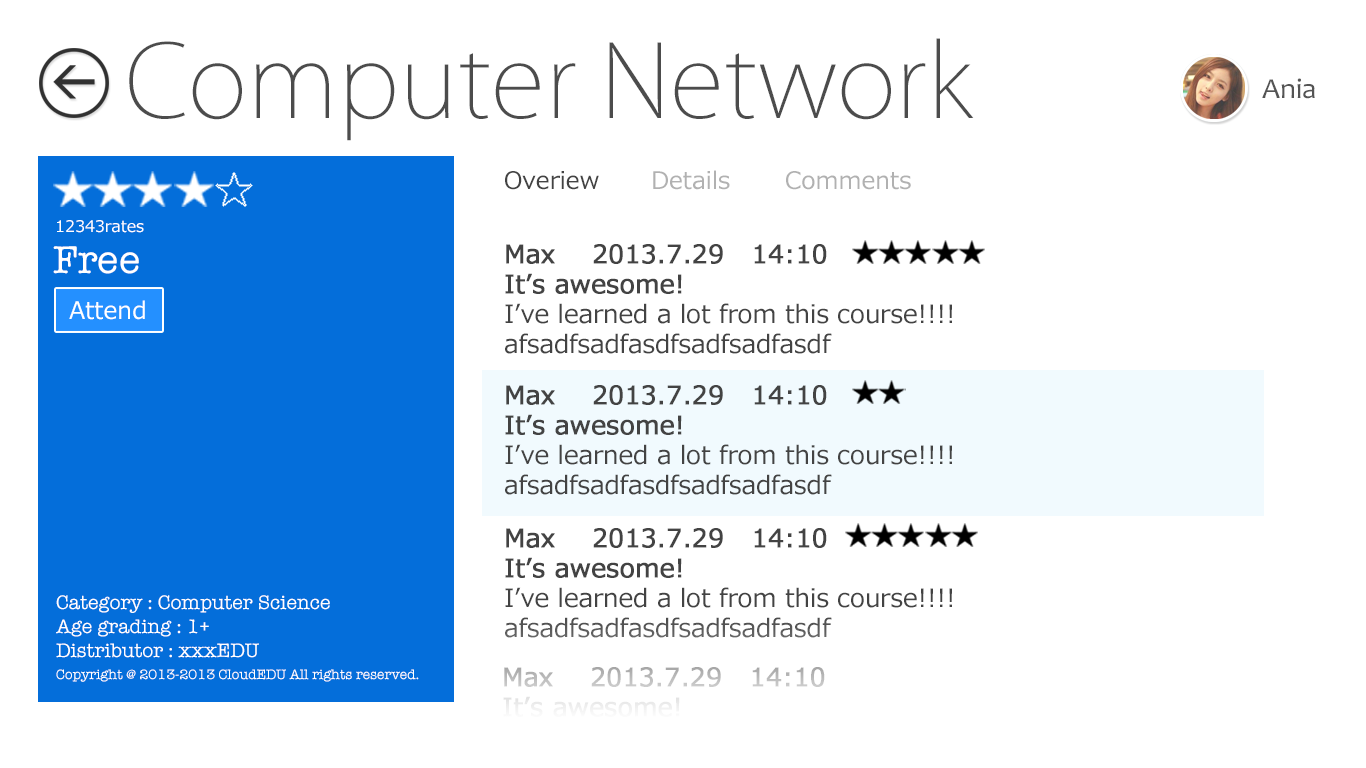
<style>
.page{position:relative;width:1366px;height:768px;background:#ffffff}
.page>*{position:absolute;margin:0}
.t1{font:100px "KozGoPr6N-ExtraLight";color:#4c4c4c}
.t2{font:29.2px "Candara";color:#545454}
.t3{font:24px "Meiryo";color:#434343}
.t4{font:24px "Meiryo";color:#b1b1b1}
.t5{font:16px "Meiryo";color:#ffffff}
.t6{font:40px "AmericanTypewriter";color:#ffffff}
.t7{font:25px "Meiryo";color:#434343}
.t8{font:25px "Meiryo";color:#434343;font-weight:bold}
.t9{font:24px "Meiryo";color:#ffffff}
.t10{font:20px "AmericanTypewriter";color:#ffffff}
.t11{font:14px "AmericanTypewriter";color:#ffffff}
</style>
<div class="page">
<p class="t1" style="left:129px;top:38px;width:845px;height:103px">Computer Network</p>
<p class="t2" style="left:1262px;top:78px;width:53px;height:21px">Ania</p>
<p class="t3" style="left:505px;top:171px;width:94px;height:19px">Overiew</p>
<p class="t4" style="left:653px;top:170px;width:77px;height:20px">Details</p>
<p class="t4" style="left:786px;top:171px;width:125px;height:19px">Comments</p>
<p class="t5" style="left:57px;top:220px;width:87px;height:13px">12343rates</p>
<p class="t6" style="left:53px;top:246px;width:86px;height:28px">Free</p>
<p class="t7" style="left:505px;top:244px;width:447px;height:110px"><span class="t8">Max    2013.7.29   14:10<br>It’s awesome!<br></span>I’ve learned a lot from this course!!!!<br>afsadfsadfasdfsadfsadfasdf</p>
<p class="t9" style="left:69px;top:300px;width:76px;height:20px">Attend</p>
<p class="t7" style="left:505px;top:385px;width:447px;height:110px"><span class="t8">Max    2013.7.29   14:10<br>It’s awesome!<br></span>I’ve learned a lot from this course!!!!<br>afsadfsadfasdfsadfsadfasdf</p>
<p class="t7" style="left:505px;top:528px;width:447px;height:110px"><span class="t8">Max    2013.7.29   14:10<br>It’s awesome!<br></span>I’ve learned a lot from this course!!!!<br>afsadfsadfasdfsadfsadfasdf</p>
<p class="t10" style="left:56px;top:595px;width:274px;height:63px">Category : Computer Science<br>Age grading : 1+<br>Distributor : xxxEDU</p>
<p class="t11" style="left:56px;top:669px;width:363px;height:13px">Copyright @ 2013-2013 CloudEDU All rights reserved.</p>
</div>
